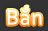
<style>
.page{position:relative;width:48px;height:31px;background:#333333}
.page>*{position:absolute;margin:0}
.t1{font:22px "Corbel";letter-spacing:0.035em;color:#ffffff}
</style>
<div class="page">
<p class="t1" style="left:7px;top:6px;width:35px;height:19px">Bắn</p>
</div>
